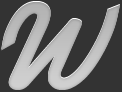
<style>
.page{position:relative;width:122px;height:92px;background:#333333}
.page>*{position:absolute;margin:0}
.t1{font:130px "Kaliakra";color:#d1d1d1}
</style>
<div class="page">
<p class="t1" style="left:1px;top:2px;width:119px;height:88px">W</p>
</div>
